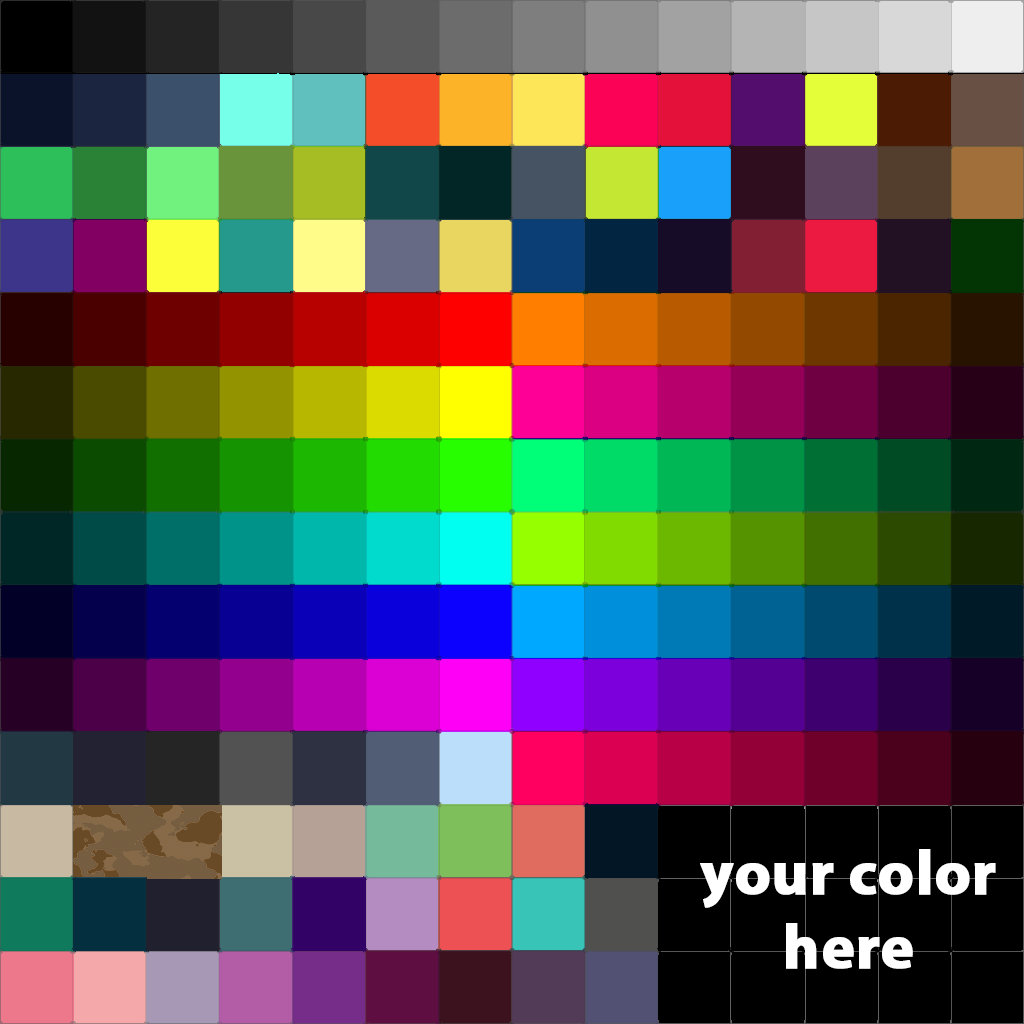
<style>
.page{position:relative;width:1024px;height:1024px}
.page>*{position:absolute;margin:0}
.t1{font:62.1px "MyriadPro-Bold";color:#ffffff;font-weight:bold}
</style>
<div class="page">
<p class="t1" style="left:700px;top:849px;width:296px;height:120px;text-align:center">your color<br>here</p>
</div>
